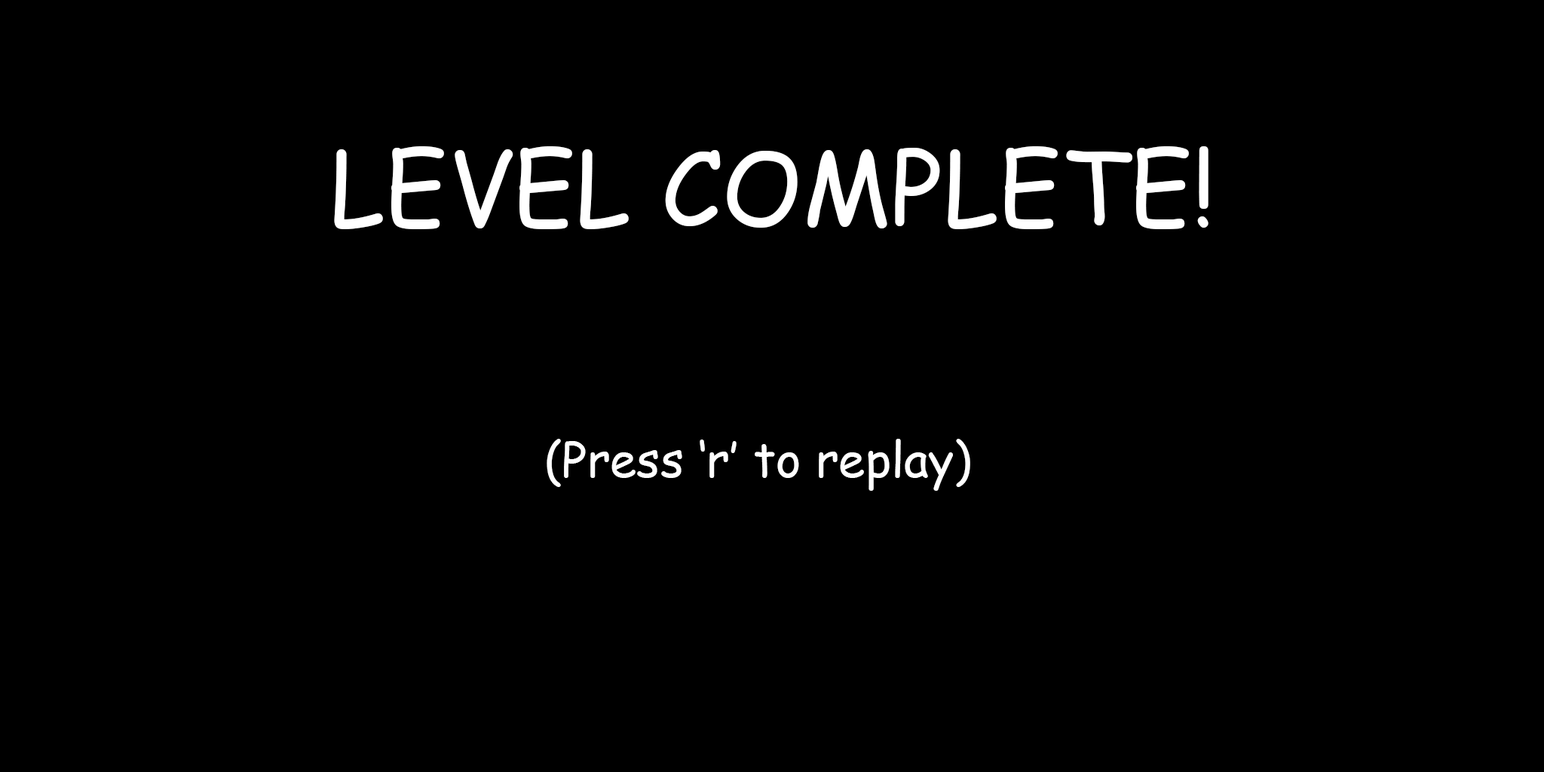
<style>
.page{position:relative;width:1544px;height:772px;background:#000000}
.page>*{position:absolute;margin:0}
.t1{font:100.5px "ComicSansMS";color:#ffffff}
.t2{font:48.3px "ComicSansMS";color:#ffffff}
</style>
<div class="page">
<p class="t1" style="left:334px;top:146px;width:875px;height:83px">LEVEL COMPLETE!</p>
<p class="t2" style="left:547px;top:439px;width:423px;height:52px">(Press ‘r’ to replay)</p>
</div>
